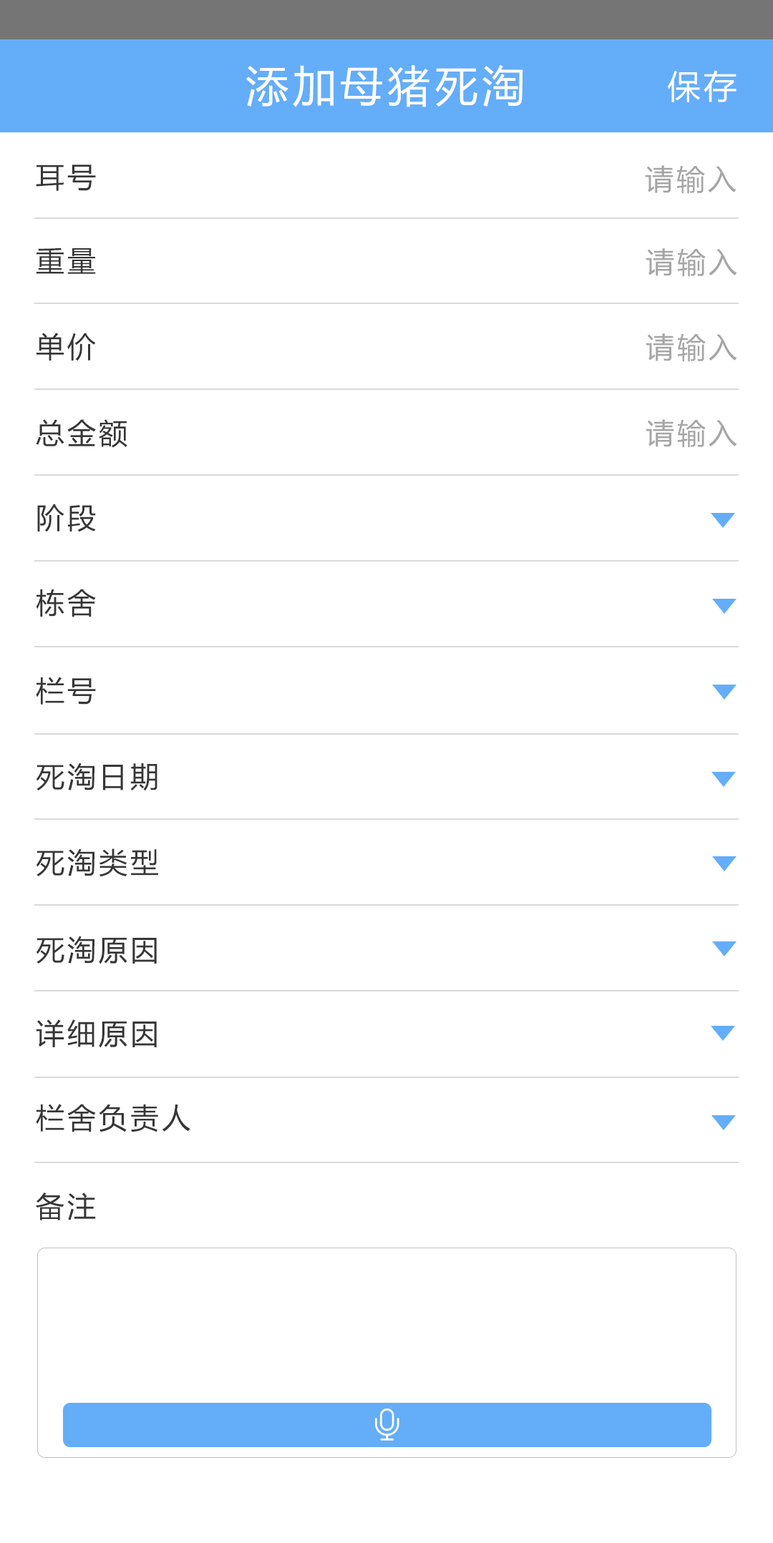
<style>
.page{position:relative;width:773px;height:1543px;background:#ffffff}
.page>*{position:absolute;margin:0}
.t1{font:42.9px "MicrosoftYaHei";letter-spacing:0.1em;color:#ffffff}
.t2{font:32.9px "MicrosoftYaHei";letter-spacing:0.1em;color:#ffffff}
.t3{font:28.6px "MicrosoftYaHei";letter-spacing:0.1em;color:#363636}
.t4{font:28.6px "MicrosoftYaHei";letter-spacing:0.1em;color:#a6a6a6}
</style>
<div class="page">
<p class="t1" style="left:246px;top:65px;width:277px;height:42px">添加母猪死淘</p>
<p class="t2" style="left:668px;top:70px;width:68px;height:32px">保存</p>
<p class="t3" style="left:36px;top:165px;width:60px;height:26px">耳号</p>
<p class="t4" style="left:645px;top:165px;width:91px;height:29px">请输入</p>
<p class="t3" style="left:36px;top:248px;width:60px;height:26px">重量</p>
<p class="t4" style="left:645px;top:248px;width:92px;height:29px">请输入</p>
<p class="t3" style="left:36px;top:333px;width:60px;height:28px">单价</p>
<p class="t4" style="left:645px;top:333px;width:92px;height:29px">请输入</p>
<p class="t3" style="left:36px;top:419px;width:91px;height:29px">总金额</p>
<p class="t4" style="left:645px;top:419px;width:92px;height:29px">请输入</p>
<p class="t3" style="left:37px;top:504px;width:59px;height:28px">阶段</p>
<p class="t3" style="left:36px;top:589px;width:60px;height:28px">栋舍</p>
<p class="t3" style="left:36px;top:677px;width:60px;height:28px">栏号</p>
<p class="t3" style="left:36px;top:763px;width:121px;height:28px">死淘日期</p>
<p class="t3" style="left:36px;top:849px;width:122px;height:28px">死淘类型</p>
<p class="t3" style="left:36px;top:936px;width:121px;height:28px">死淘原因</p>
<p class="t3" style="left:36px;top:1020px;width:121px;height:28px">详细原因</p>
<p class="t3" style="left:36px;top:1104px;width:154px;height:29px">栏舍负责人</p>
<p class="t3" style="left:36px;top:1193px;width:60px;height:28px">备注</p>
</div>
